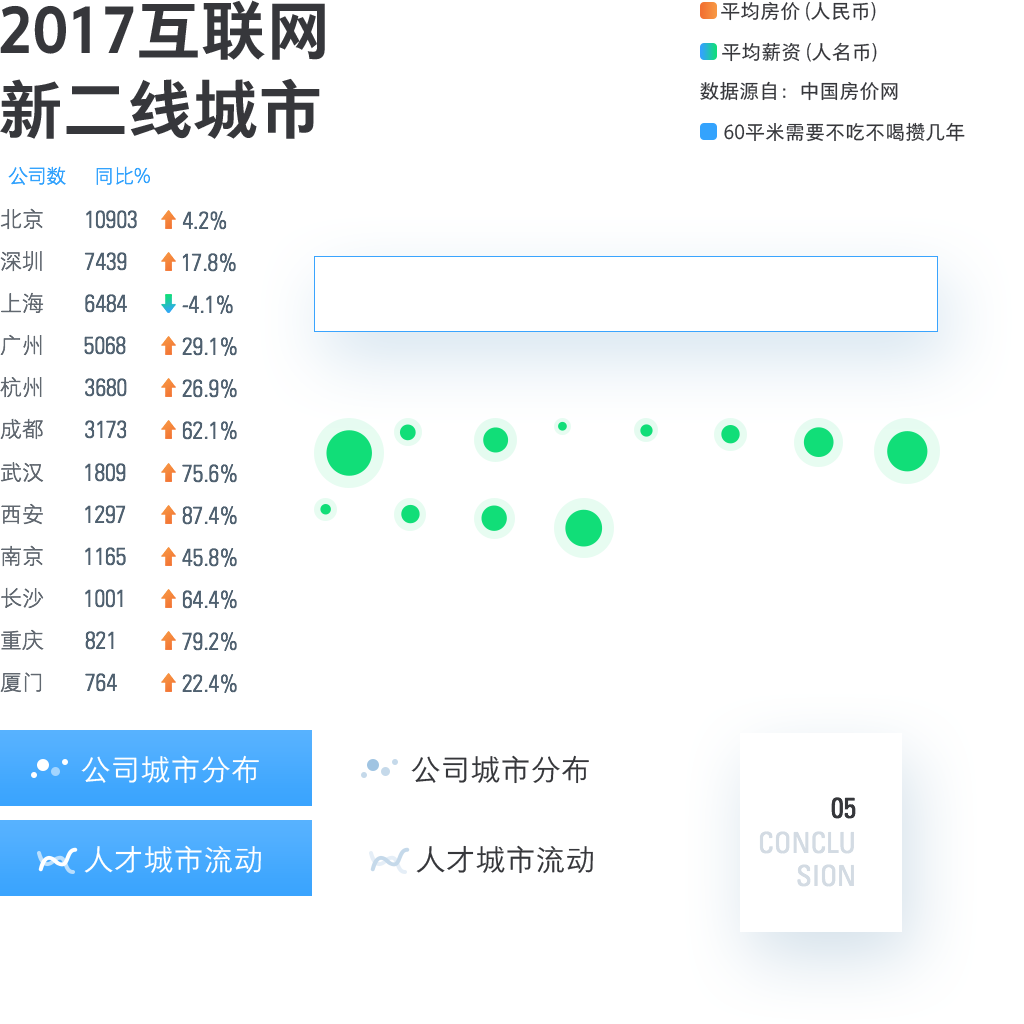
<style>
.page{position:relative;width:1024px;height:1024px;background:#ffffff}
.page>*{position:absolute;margin:0}
.t1{font:64.9px/78.9px "FZYOUH_512B--GB1-4";color:#36373b}
.t2{font:20px "FZYOUH_508R--GB1-4";color:#36373b}
.t3{font:20px "FZYOUH_503L--GB1-4";letter-spacing:-0.05em;color:#34a3fd}
.t4{font:20px "FZYOUH_503L--GB1-4";color:#34a3fd}
.t5{font:22px "FZYOUH_503L--GB1-4";color:#616870}
.t6{font:24px "UniversLTStd-LightCn";color:#506170}
.t7{font:30px "FZYOUH_506L--GB1-4";color:#ffffff}
.t8{font:30px "FZYOUH_506L--GB1-4";color:#36373b}
.t9{font:28.4px "UniversLTStd-Cn";color:#36373b;text-transform:uppercase}
.t10{font:28.4px/33.6px "UniversLTStd-Cn";color:#d3dbe3;text-transform:uppercase}
</style>
<div class="page">
<p class="t1" style="left:0px;top:0px;width:325px;height:139px">2017互联网<br>新二线城市</p>
<p class="t2" style="left:721px;top:1px;width:155px;height:20px">平均房价 (人民币)</p>
<p class="t2" style="left:722px;top:42px;width:155px;height:20px">平均薪资 (人名币)</p>
<p class="t2" style="left:700px;top:81px;width:198px;height:20px">数据源自：中国房价网</p>
<p class="t2" style="left:724px;top:122px;width:241px;height:20px">60平米需要不吃不喝攒几年</p>
<p class="t3" style="left:8px;top:166px;width:58px;height:19px">公司数</p>
<p class="t4" style="left:96px;top:166px;width:54px;height:19px">同比%</p>
<p class="t5" style="left:0px;top:208px;width:43px;height:22px">北京</p>
<p class="t6" style="left:86px;top:210px;width:51px;height:19px">10903</p>
<p class="t6" style="left:182px;top:211px;width:45px;height:19px">4.2%</p>
<p class="t5" style="left:0px;top:251px;width:42px;height:21px">深圳</p>
<p class="t6" style="left:84px;top:252px;width:43px;height:19px">7439</p>
<p class="t6" style="left:182px;top:253px;width:54px;height:19px">17.8%</p>
<p class="t5" style="left:1px;top:292px;width:43px;height:21px">上海</p>
<p class="t6" style="left:85px;top:294px;width:42px;height:19px">6484</p>
<p class="t6" style="left:182px;top:295px;width:51px;height:19px">-4.1%</p>
<p class="t5" style="left:0px;top:334px;width:42px;height:22px">广州</p>
<p class="t6" style="left:84px;top:336px;width:42px;height:19px">5068</p>
<p class="t6" style="left:182px;top:337px;width:55px;height:19px">29.1%</p>
<p class="t5" style="left:0px;top:377px;width:42px;height:21px">杭州</p>
<p class="t6" style="left:85px;top:378px;width:42px;height:19px">3680</p>
<p class="t6" style="left:182px;top:379px;width:55px;height:19px">26.9%</p>
<p class="t5" style="left:0px;top:418px;width:43px;height:22px">成都</p>
<p class="t6" style="left:85px;top:420px;width:42px;height:19px">3173</p>
<p class="t6" style="left:182px;top:421px;width:55px;height:19px">62.1%</p>
<p class="t5" style="left:0px;top:462px;width:44px;height:20px">武汉</p>
<p class="t6" style="left:85px;top:463px;width:41px;height:19px">1809</p>
<p class="t6" style="left:182px;top:464px;width:55px;height:19px">75.6%</p>
<p class="t5" style="left:1px;top:503px;width:42px;height:22px">西安</p>
<p class="t6" style="left:85px;top:505px;width:41px;height:19px">1297</p>
<p class="t6" style="left:182px;top:506px;width:55px;height:19px">87.4%</p>
<p class="t5" style="left:1px;top:545px;width:42px;height:22px">南京</p>
<p class="t6" style="left:85px;top:547px;width:41px;height:19px">1165</p>
<p class="t6" style="left:182px;top:548px;width:55px;height:19px">45.8%</p>
<p class="t5" style="left:1px;top:587px;width:43px;height:22px">长沙</p>
<p class="t6" style="left:85px;top:589px;width:38px;height:19px">1001</p>
<p class="t6" style="left:182px;top:590px;width:55px;height:19px">64.4%</p>
<p class="t5" style="left:1px;top:629px;width:43px;height:21px">重庆</p>
<p class="t6" style="left:85px;top:631px;width:29px;height:19px">821</p>
<p class="t6" style="left:182px;top:632px;width:55px;height:19px">79.2%</p>
<p class="t5" style="left:0px;top:672px;width:42px;height:21px">厦门</p>
<p class="t6" style="left:85px;top:673px;width:32px;height:19px">764</p>
<p class="t6" style="left:182px;top:674px;width:55px;height:19px">22.4%</p>
<p class="t7" style="left:81px;top:755px;width:178px;height:29px">公司城市分布</p>
<p class="t8" style="left:411px;top:755px;width:178px;height:29px">公司城市分布</p>
<p class="t9" style="left:831px;top:797px;width:25px;height:22px">05</p>
<p class="t10" style="left:759px;top:831px;width:95px;height:56px;text-align:right">conclu<br>sion</p>
<p class="t7" style="left:84px;top:845px;width:177px;height:29px">人才城市流动</p>
<p class="t8" style="left:416px;top:845px;width:177px;height:29px">人才城市流动</p>
</div>
